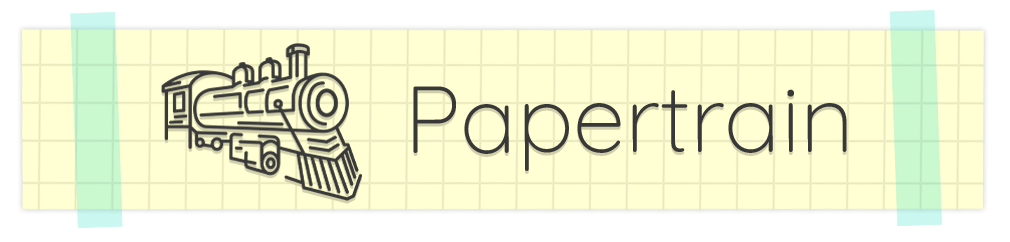
<style>
.page{position:relative;width:1010px;height:242px;background:#ffffd3}
.page>*{position:absolute;margin:0}
.t1{font:95px "Quicksand-Light";color:#383838}
</style>
<div class="page">
<p class="t1" style="left:413px;top:86px;width:434px;height:85px">Papertrain</p>
</div>
